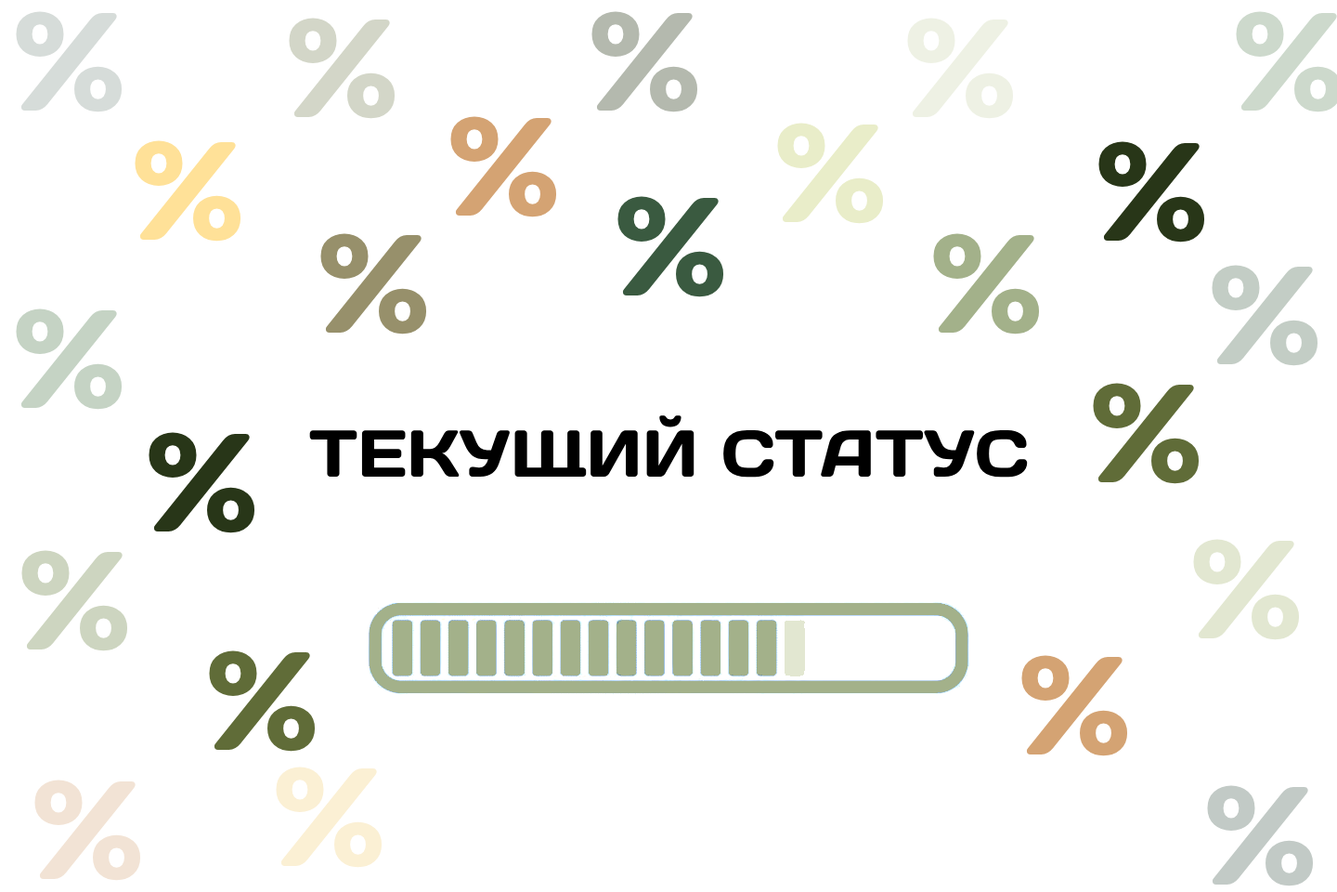
<style>
.page{position:relative;width:1337px;height:892px;background:#ffffff}
.page>*{position:absolute;margin:0}
.t1{font:139.3px "DaysOne-Regular";color:#d6dcd9}
.t2{font:139.3px "DaysOne-Regular";color:#d3d6c8}
.t3{font:139.3px "DaysOne-Regular";color:#b4b9ae}
.t4{font:139.3px "DaysOne-Regular";color:#eef1e4}
.t5{font:139.3px "DaysOne-Regular";color:#d4a373}
.t6{font:139.3px "DaysOne-Regular";color:#e9edc9}
.t7{font:139.3px "DaysOne-Regular";color:#ffe198}
.t8{font:139.3px "DaysOne-Regular";color:#283618}
.t9{font:139.3px "DaysOne-Regular";color:#3a5a40}
.t10{font:139.3px "DaysOne-Regular";color:#97906b}
.t11{font:139.3px "DaysOne-Regular";color:#a3b18a}
.t12{font:139.3px "DaysOne-Regular";color:#c3cdc5}
.t13{font:139.3px "DaysOne-Regular";color:#c5d3c4}
.t14{font:139.3px "DaysOne-Regular";color:#606c38}
.t15{font:65.9px "DaysOne-Regular";color:#000000}
.t16{font:139.3px "DaysOne-Regular";color:#e2e7d1}
.t17{font:139.3px "DaysOne-Regular";color:#cdd5c0}
.t18{font:139.3px "DaysOne-Regular";color:#faedcd}
.t19{font:139.3px "DaysOne-Regular";color:#f2e3d5}
.t20{font:139.3px "DaysOne-Regular";color:#c2cac6}
</style>
<div class="page">
<p class="t1" style="left:16px;top:11px;width:107px;height:101px">%</p>
<p class="t2" style="left:289px;top:18px;width:107px;height:101px">%</p>
<p class="t3" style="left:592px;top:11px;width:106px;height:101px">%</p>
<p class="t4" style="left:907px;top:18px;width:107px;height:101px">%</p>
<p class="t5" style="left:450px;top:116px;width:107px;height:101px">%</p>
<p class="t6" style="left:777px;top:123px;width:107px;height:101px">%</p>
<p class="t7" style="left:135px;top:140px;width:106px;height:101px">%</p>
<p class="t8" style="left:1099px;top:141px;width:107px;height:101px">%</p>
<p class="t9" style="left:618px;top:196px;width:106px;height:101px">%</p>
<p class="t10" style="left:320px;top:233px;width:107px;height:101px">%</p>
<p class="t11" style="left:933px;top:233px;width:107px;height:101px">%</p>
<p class="t12" style="left:1212px;top:265px;width:107px;height:101px">%</p>
<p class="t13" style="left:16px;top:308px;width:107px;height:102px">%</p>
<p class="t14" style="left:1093px;top:383px;width:107px;height:101px">%</p>
<p class="t15" style="left:309px;top:415px;width:719px;height:62px">ТЕКУЩИЙ СТАТУС</p>
<p class="t8" style="left:149px;top:432px;width:106px;height:101px">%</p>
<p class="t16" style="left:1193px;top:539px;width:107px;height:101px">%</p>
<p class="t17" style="left:21px;top:550px;width:107px;height:101px">%</p>
<p class="t14" style="left:209px;top:650px;width:107px;height:101px">%</p>
<p class="t5" style="left:1022px;top:655px;width:106px;height:101px">%</p>
<p class="t18" style="left:276px;top:766px;width:107px;height:101px">%</p>
<p class="t19" style="left:34px;top:779px;width:107px;height:101px">%</p>
<p class="t20" style="left:1207px;top:785px;width:107px;height:101px">%</p>
</div>
